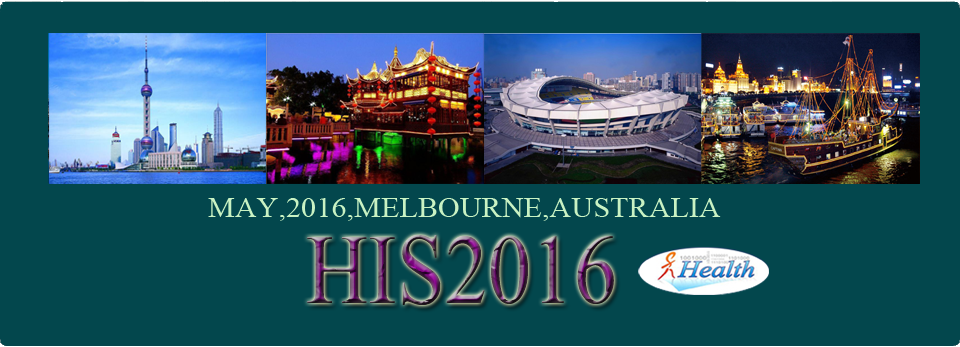
<style>
.page{position:relative;width:960px;height:347px;background:#03474d}
.page>*{position:absolute;margin:0}
.t1{font:28.3px "TimesNewRomanPSMT";color:#c9f2c3;scale:1.07 1}
.t2{font:122.9px "Aparajita";scale:0.87 1}
</style>
<div class="page">
<p class="t1" style="left:208px;top:198px;width:513px;height:23px">MAY,2016,MELBOURNE,AUSTRALIA</p>
<p class="t2" style="left:307px;top:235px;width:307px;height:70px">HIS2016</p>
</div>
